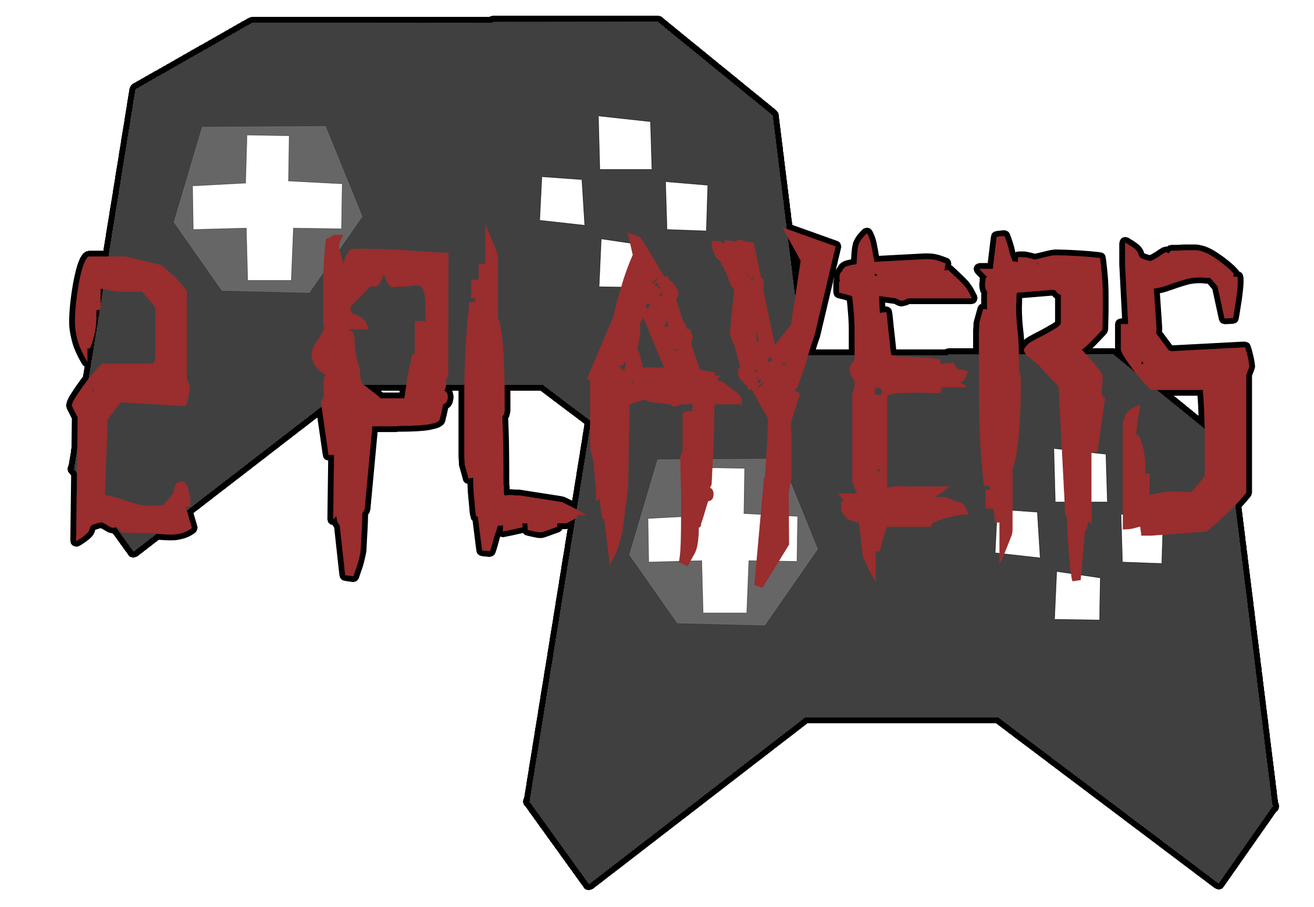
<style>
.page{position:relative;width:1314px;height:907px;background:#ffffff}
.page>*{position:absolute;margin:0}
.t1{font:386.7px "HorroroidBold";color:#9a2d2d}
</style>
<div class="page">
<p class="t1" style="left:72px;top:224px;width:1177px;height:365px">2 PLAYERS</p>
</div>
